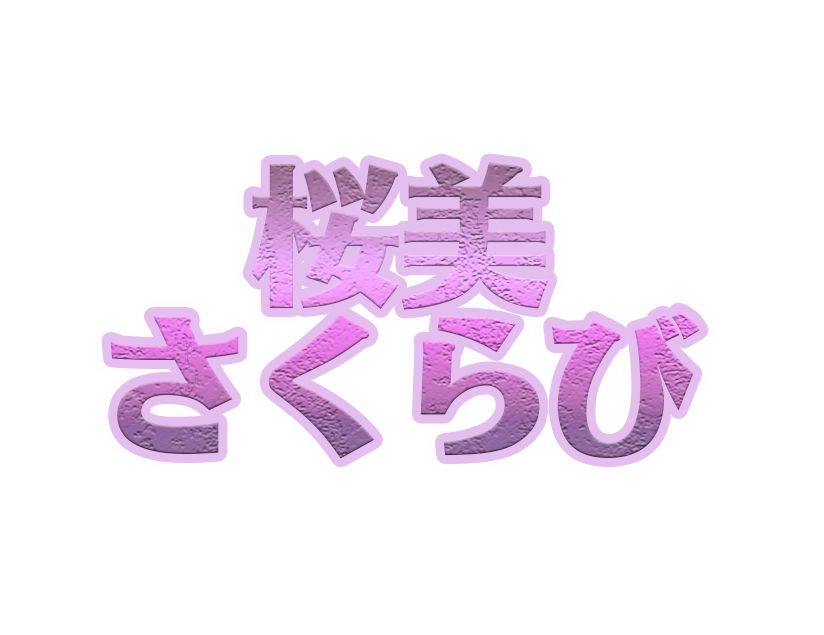
<style>
.page{position:relative;width:824px;height:635px;background:#ffffff}
.page>*{position:absolute;margin:0}
.t1{font:150px/150px "FZJTH"}
</style>
<div class="page">
<p class="t1" style="left:110px;top:162px;width:590px;height:297px;text-align:center">桜美<br>さくらび</p>
</div>
